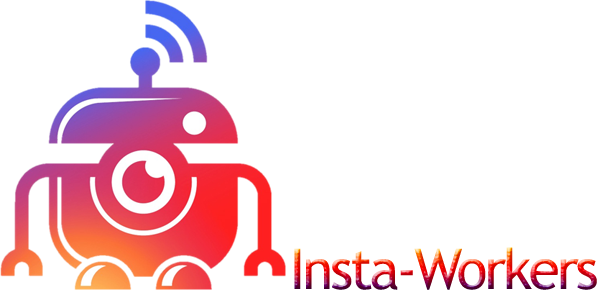
<style>
.page{position:relative;width:601px;height:294px;background:#ffffff}
.page>*{position:absolute;margin:0}
.t1{font:56.2px "TrebuchetMS";letter-spacing:-0.05em}
</style>
<div class="page">
<p class="t1" style="left:294px;top:247px;width:303px;height:43px">Insta-Workers</p>
</div>
